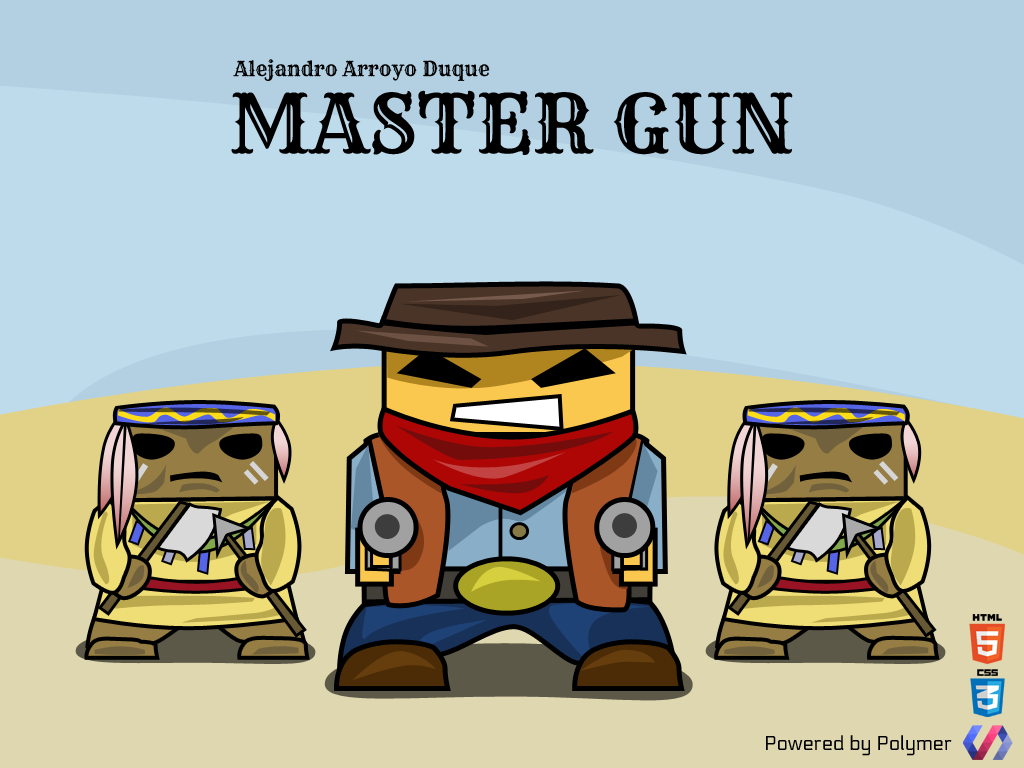
<style>
.page{position:relative;width:1024px;height:768px;background:#bedbec}
.page>*{position:absolute;margin:0}
.t1{font:20px "Rye-Regular";color:#000000}
.t2{font:80px "Rye-Regular";color:#000000}
.t3{font:20px "Electrolize-Regular";color:#000000}
</style>
<div class="page">
<p class="t1" style="left:233px;top:59px;width:257px;height:22px">Alejandro Arroyo Duque</p>
<p class="t2" style="left:231px;top:90px;width:562px;height:65px">MASTER GUN</p>
<p class="t3" style="left:766px;top:735px;width:186px;height:21px">Powered by Polymer</p>
</div>
